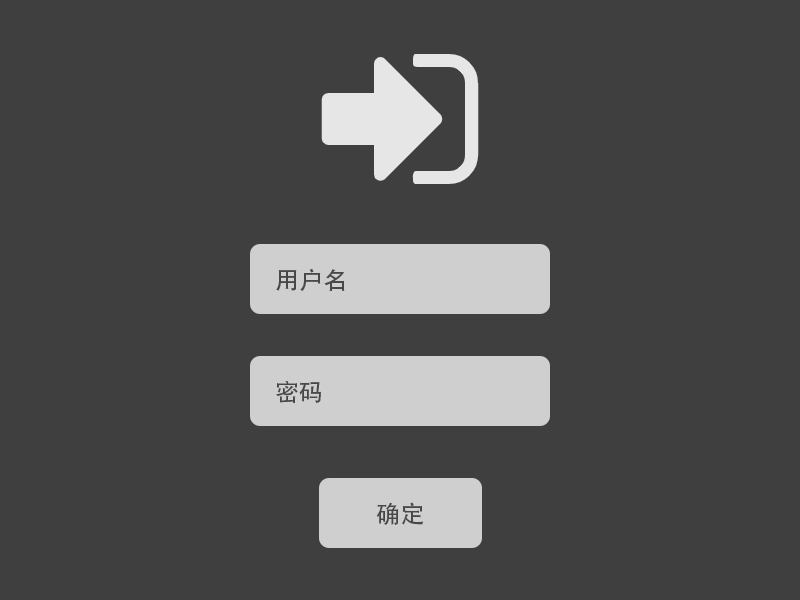
<style>
.page{position:relative;width:800px;height:600px;background:#3f3f3f}
.page>*{position:absolute;margin:0}
.t1{font:24px "AdobeHeitiStd-Regular";color:#484848}
</style>
<div class="page">
<p class="t1" style="left:276px;top:268px;width:69px;height:23px">用户名</p>
<p class="t1" style="left:276px;top:381px;width:45px;height:22px">密码</p>
<p class="t1" style="left:376px;top:502px;width:48px;height:23px">确定</p>
</div>
